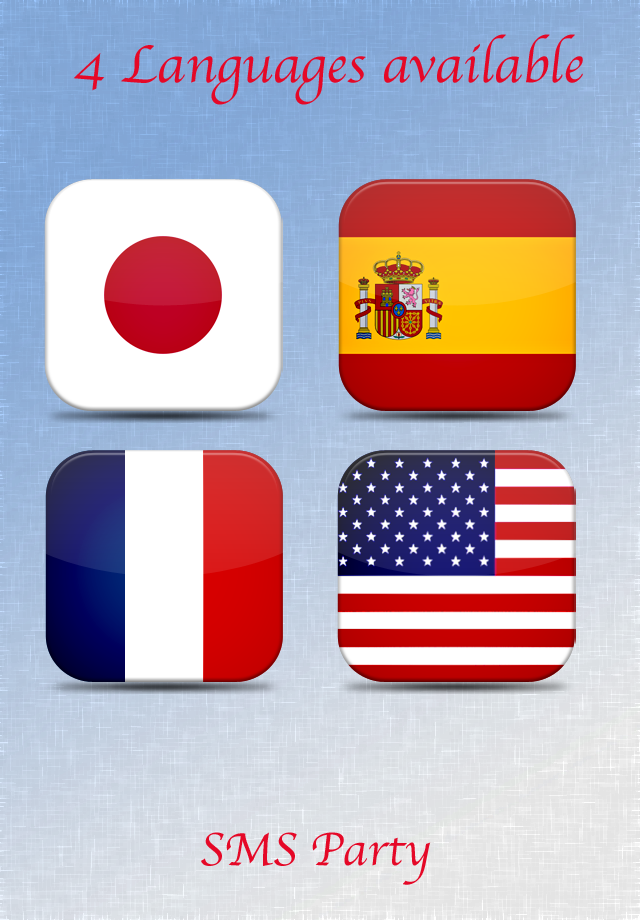
<style>
.page{position:relative;width:640px;height:920px}
.page>*{position:absolute;margin:0}
.t1{font:55px "Apple-Chancery";color:#e50827}
.t2{font:48px "Apple-Chancery";color:#e50827}
</style>
<div class="page">
<p class="t1" style="left:73px;top:34px;width:510px;height:71px">4 Languages available</p>
<p class="t2" style="left:201px;top:832px;width:230px;height:53px">SMS Party</p>
</div>
